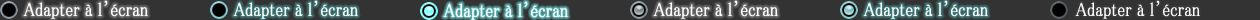
<style>
.page{position:relative;width:1260px;height:20px;background:#333333}
.page>*{position:absolute;margin:0}
.t1{font:19px "MS-PMincho";color:#ffffff;font-weight:bold;scale:0.84 1}
</style>
<div class="page">
<p class="t1" style="left:23px;top:0px;width:125px;height:19px">Adapter à l’écran</p>
<p class="t1" style="left:233px;top:0px;width:125px;height:19px">Adapter à l’écran</p>
<p class="t1" style="left:443px;top:1px;width:125px;height:19px">Adapter à l’écran</p>
<p class="t1" style="left:653px;top:0px;width:125px;height:19px">Adapter à l’écran</p>
<p class="t1" style="left:863px;top:0px;width:125px;height:19px">Adapter à l’écran</p>
<p class="t1" style="left:1075px;top:0px;width:125px;height:19px">Adapter à l’écran</p>
</div>
